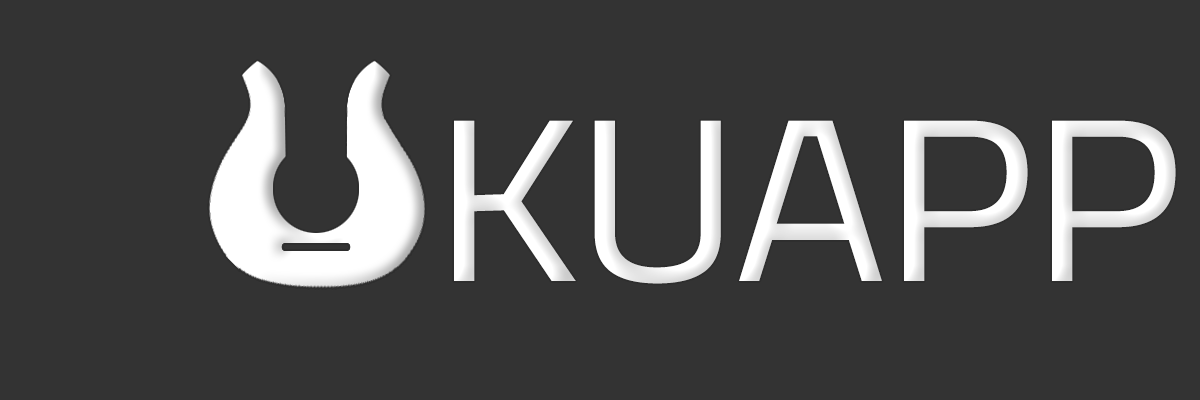
<style>
.page{position:relative;width:1200px;height:400px;background:#333333}
.page>*{position:absolute;margin:0}
.t1{font:231.4px "TitilliumWeb-Regular";letter-spacing:-0.024em;color:#ffffff;scale:1.12 1}
</style>
<div class="page">
<p class="t1" style="left:291px;top:120px;width:885px;height:164px">UKUAPP</p>
</div>
